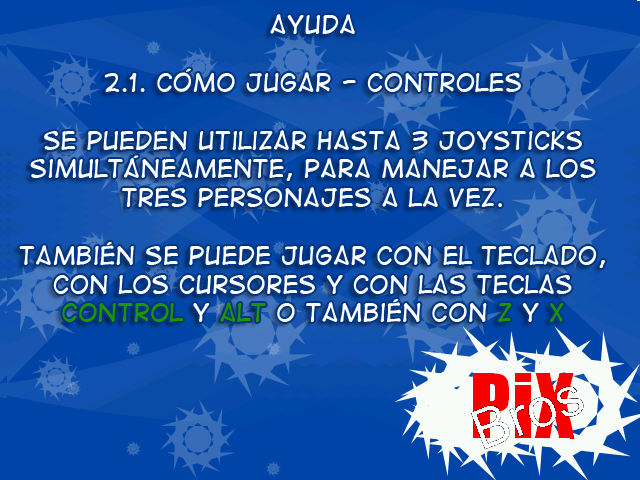
<style>
.page{position:relative;width:640px;height:480px;background:#0044a8}
.page>*{position:absolute;margin:0}
.t1{font:24px "DigitalStrip2";color:#ffffff}
.t2{font:24px "DigitalStrip2";color:#1f9300}
</style>
<div class="page">
<p class="t1" style="left:19px;top:14px;width:586px;height:309px;text-align:center">AYUDA<br><br>2.1. Cómo jugar - Controles<br><br>se pueden utilizar hasta 3 joysticks <br>simultáneamente, para manejar a los tres personajes a la vez.<br><br>También se puede jugar con el teclado, con los cursores y con las teclas <span class="t2">control </span>y <span class="t2">alt </span>o también con <span class="t2">z </span>y <span class="t2">x</span></p>
</div>
